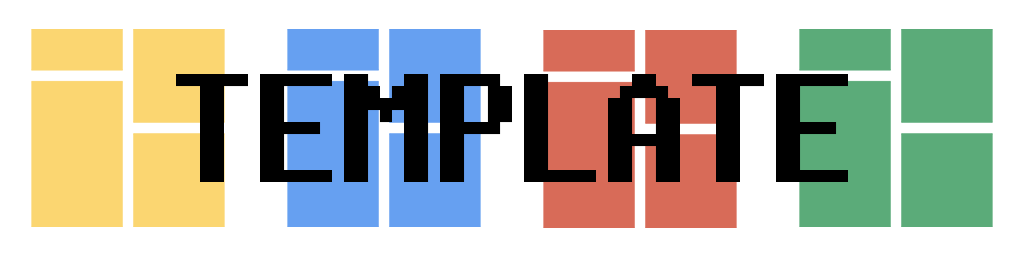
<style>
.page{position:relative;width:1024px;height:256px;background:#ffffff}
.page>*{position:absolute;margin:0}
.t1{font:120px "Eight-Bit-Dragon";color:#000000}
</style>
<div class="page">
<p class="t1" style="left:176px;top:74px;width:672px;height:108px">TEMPLATE</p>
</div>
